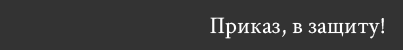
<style>
.page{position:relative;width:403px;height:50px;background:#333333}
.page>*{position:absolute;margin:0}
.t1{font:24px "CrimsonText-Regular";color:#ffffff}
</style>
<div class="page">
<p class="t1" style="left:210px;top:17px;width:174px;height:22px">Приказ, в защиту!</p>
</div>
